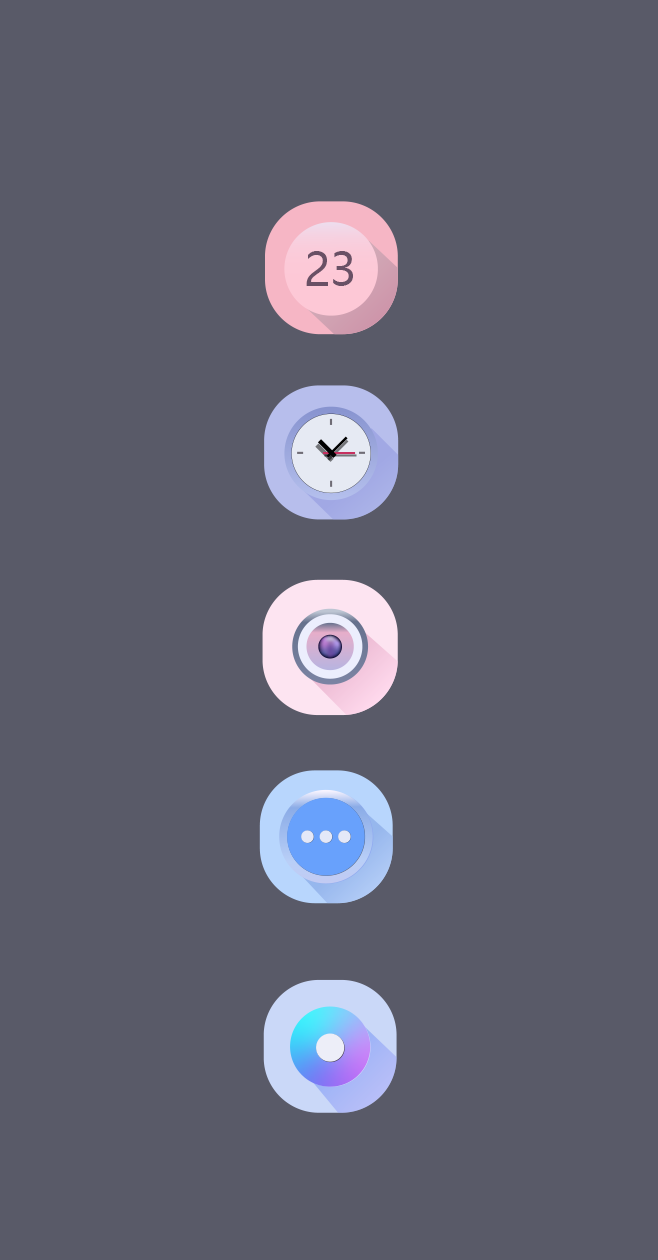
<style>
.page{position:relative;width:658px;height:1260px;background:#595a68}
.page>*{position:absolute;margin:0}
.t1{font:44.6px "MicrosoftYaHeiUI";color:#695065}
</style>
<div class="page">
<p class="t1" style="left:306px;top:251px;width:47px;height:35px">23</p>
</div>
